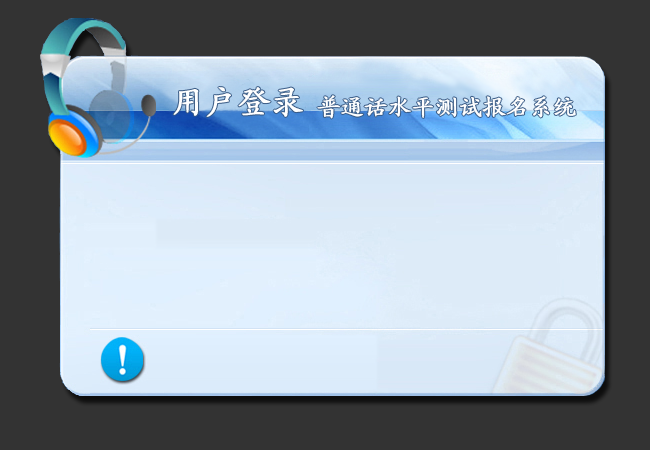
<style>
.page{position:relative;width:650px;height:450px;background:#333333}
.page>*{position:absolute;margin:0}
.t1{font:32px "KaiTi_GB2312";color:#ffffff;font-weight:bold}
.t2{font:23px "KaiTi_GB2312";color:#ffffff;font-weight:bold}
</style>
<div class="page">
<p class="t1" style="left:173px;top:87px;width:130px;height:30px">用户登录</p>
<p class="t2" style="left:317px;top:95px;width:259px;height:24px">普通话水平测试报名系统</p>
</div>
